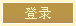
<style>
.page{position:relative;width:76px;height:26px;background:#fff5c7}
.page>*{position:absolute;margin:0}
.t1{font:13px "SimSun";letter-spacing:0.1em;color:#fff5c7}
</style>
<div class="page">
<p class="t1" style="left:25px;top:7px;width:26px;height:12px">登录</p>
</div>
